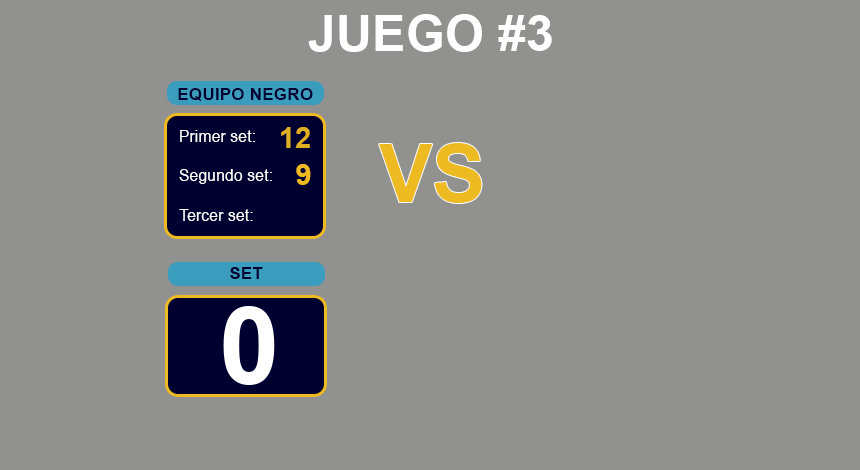
<style>
.page{position:relative;width:860px;height:470px;background:#91918f}
.page>*{position:absolute;margin:0}
.t1{font:50.2px "Arial-BoldMT";color:#ffffff}
.t2{font:17.4px "Arial-BoldMT";color:#000030}
.t3{font:17.4px "ArialNarrow";color:#ffffff;scale:1.12 1}
.t4{font:29.1px "Arial-BoldMT";color:#dfaf23}
.t5{font:80px "Arial-BoldMT";color:#eeba22}
.t6{font:29.1px "Arial-BoldMT";color:#eeba22}
</style>
<div class="page">
<p class="t1" style="left:308px;top:14px;width:244px;height:38px">JUEGO #3</p>
<p class="t2" style="left:178px;top:88px;width:135px;height:13px">EQUIPO NEGRO</p>
<p class="t3" style="left:180px;top:130px;width:75px;height:12px">Primer set:</p>
<p class="t4" style="left:281px;top:127px;width:29px;height:21px">12</p>
<p class="t5" style="left:379px;top:143px;width:103px;height:60px">VS</p>
<p class="t3" style="left:179px;top:169px;width:93px;height:15px">Segundo set:</p>
<p class="t6" style="left:296px;top:164px;width:15px;height:21px">9</p>
<p class="t3" style="left:179px;top:209px;width:74px;height:12px">Tercer set:</p>
<p class="t2" style="left:230px;top:267px;width:33px;height:12px">SET</p>
</div>
